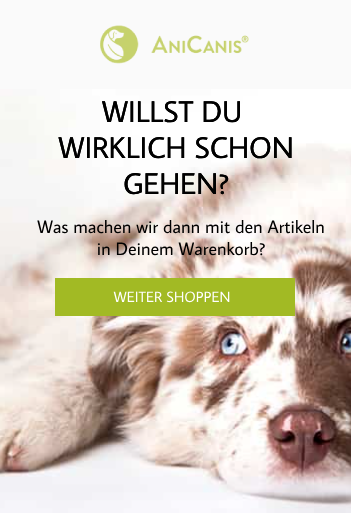
<style>
.page{position:relative;width:351px;height:513px}
.page>*{position:absolute;margin:0}
.t1{font:30px "AverageSans-Regular";color:#000000}
.t2{font:18px "AverageSans-Regular";color:#000000}
.t3{font:15px "AverageSans-Regular";color:#ffffff}
</style>
<div class="page">
<p class="t1" style="left:58px;top:100px;width:234px;height:95px;text-align:center">WILLST DU <br>WIRKLICH SCHON<br>GEHEN?</p>
<p class="t1" style="left:58px;top:100px;width:234px;height:95px;text-align:center">WILLST DU <br>WIRKLICH SCHON<br>GEHEN?</p>
<p class="t2" style="left:37px;top:220px;width:287px;height:36px;text-align:center">Was machen wir dann mit den Artikeln<br>in Deinem Warenkorb?</p>
<p class="t3" style="left:113px;top:291px;width:117px;height:12px">WEITER SHOPPEN</p>
</div>
